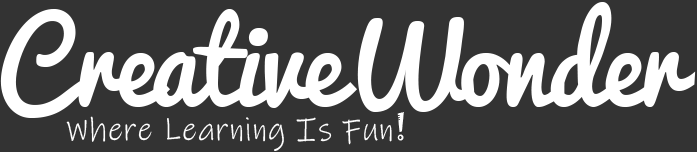
<style>
.page{position:relative;width:697px;height:152px;background:#333333}
.page>*{position:absolute;margin:0}
.t1{font:111.6px "Pacifico";letter-spacing:-0.025em;color:#ffffff;scale:0.95 1}
.t2{font:33.5px "InkFree";letter-spacing:0.025em;color:#ffffff;scale:0.95 1}
.t3{font:33.5px "Jokerman-Regular";letter-spacing:0.025em;color:#ffffff;scale:0.95 1}
</style>
<div class="page">
<p class="t1" style="left:0px;top:2px;width:696px;height:116px">CreativeWonder</p>
<p class="t2" style="left:66px;top:112px;width:338px;height:39px">Where Learning Is Fun<span class="t3">!</span></p>
</div>
